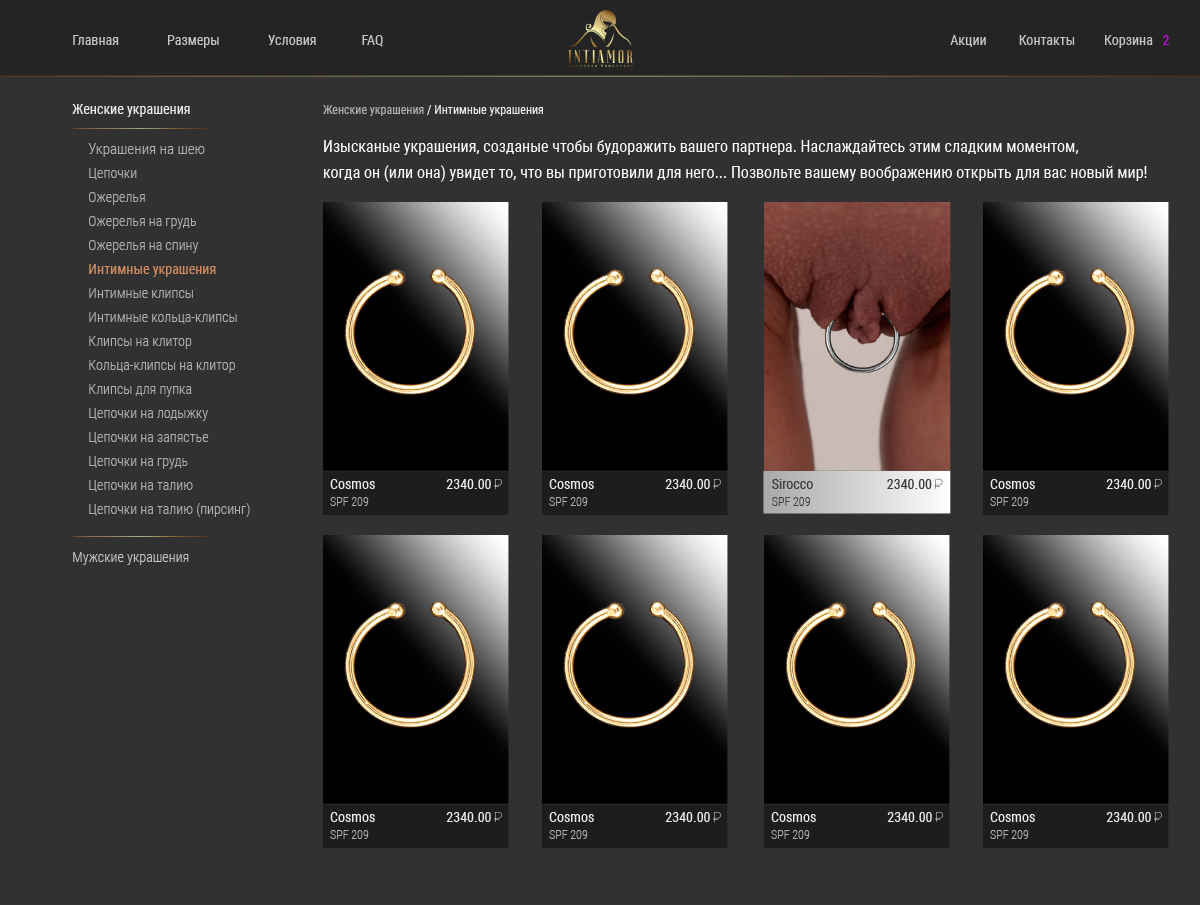
<style>
.page{position:relative;width:1200px;height:905px;background:#313131}
.page>*{position:absolute;margin:0}
.t1{font:14px "RobotoCondensed-Regular";color:#c6c6c5}
.t2{font:14px "RobotoCondensed-Regular";color:#bf0cea}
.t3{font:14px "RobotoCondensed-Regular";color:#ececec}
.t4{font:12px "RobotoCondensed-Regular";color:#ececec}
.t5{font:12px "RobotoCondensed-Regular";color:#b1b1b1}
.t6{font:14px/24px "RobotoCondensed-Light";color:#b1b1b1}
.t7{font:15px/24px "RobotoCondensed-Light";color:#b1b1b1}
.t8{font:14px/24px "RobotoCondensed-Regular";color:#d28c5e}
.t9{font:16px/26px "RobotoCondensed-Regular";color:#ffffff}
.t10{font:16px/26px "RobotoCondensed-Bold";color:#ffffff}
.t11{font:14px "RobotoCondensed-Regular";color:#3c3c3b}
.t12{font:12px "RobotoCondensed-Light";color:#b1b1b1}
.t13{font:12px "RobotoCondensed-Light";color:#3c3c3b}
.t14{font:14px "RobotoCondensed-Light";color:#c6c6c5}
</style>
<div class="page">
<p class="t1" style="left:73px;top:35px;width:310px;height:13px">Главная               Размеры               Условия              FAQ</p>
<p class="t1" style="left:950px;top:35px;width:219px;height:13px">Акции          Контакты         Корзина   <span class="t2">2</span></p>
<p class="t3" style="left:72px;top:104px;width:118px;height:13px">Женские украшения</p>
<p class="t4" style="left:323px;top:105px;width:220px;height:11px"><span class="t5">Женские украшения</span> / Интимные украшения</p>
<p class="t6" style="left:88px;top:143px;width:162px;height:374px"><span class="t7">Украшения на шею<br></span>Цепочки <br>Ожерелья <br>Ожерелья на грудь<br>Ожерелья на спину<br><span class="t8">Интимные украшения<br></span>Интимные клипсы<br>Интимные кольца-клипсы <br>Клипсы на клитор<br>Кольца-клипсы на клитор<br>Клипсы для пупка<br>Цепочки на лодыжку<br>Цепочки на запястье<br>Цепочки на грудь<br>Цепочки на талию <br>Цепочки на талию (пирсинг)</p>
<p class="t9" style="left:324px;top:140px;width:823px;height:42px"><span class="t10"><br></span>Изысканые украшения, созданые чтобы будоражить вашего партнера. Наслаждайтесь этим сладким моментом, <br>когда он (или она) увидет то, что вы приготовили для него... Позвольте вашему воображению открыть для вас новый мир!</p>
<p class="t3" style="left:330px;top:479px;width:45px;height:10px">Cosmos</p>
<p class="t3" style="left:446px;top:479px;width:45px;height:10px">2340.00</p>
<p class="t3" style="left:549px;top:479px;width:45px;height:10px">Cosmos</p>
<p class="t3" style="left:665px;top:479px;width:45px;height:10px">2340.00</p>
<p class="t11" style="left:772px;top:479px;width:41px;height:10px">Sirocco</p>
<p class="t11" style="left:887px;top:479px;width:45px;height:10px">2340.00</p>
<p class="t3" style="left:990px;top:479px;width:45px;height:10px">Cosmos</p>
<p class="t3" style="left:1106px;top:479px;width:45px;height:10px">2340.00</p>
<p class="t12" style="left:330px;top:497px;width:39px;height:9px">SPF 209</p>
<p class="t12" style="left:549px;top:497px;width:39px;height:9px">SPF 209</p>
<p class="t13" style="left:772px;top:497px;width:38px;height:9px">SPF 209</p>
<p class="t12" style="left:990px;top:497px;width:39px;height:9px">SPF 209</p>
<p class="t14" style="left:73px;top:552px;width:116px;height:13px">Мужские украшения</p>
<p class="t3" style="left:330px;top:812px;width:45px;height:10px">Cosmos</p>
<p class="t3" style="left:446px;top:812px;width:45px;height:10px">2340.00</p>
<p class="t3" style="left:549px;top:812px;width:45px;height:10px">Cosmos</p>
<p class="t3" style="left:665px;top:812px;width:45px;height:10px">2340.00</p>
<p class="t3" style="left:771px;top:812px;width:45px;height:10px">Cosmos</p>
<p class="t3" style="left:887px;top:812px;width:45px;height:10px">2340.00</p>
<p class="t3" style="left:990px;top:812px;width:45px;height:10px">Cosmos</p>
<p class="t3" style="left:1106px;top:812px;width:45px;height:10px">2340.00</p>
<p class="t12" style="left:330px;top:830px;width:39px;height:9px">SPF 209</p>
<p class="t12" style="left:549px;top:830px;width:39px;height:9px">SPF 209</p>
<p class="t12" style="left:771px;top:830px;width:39px;height:9px">SPF 209</p>
<p class="t12" style="left:990px;top:830px;width:39px;height:9px">SPF 209</p>
</div>
